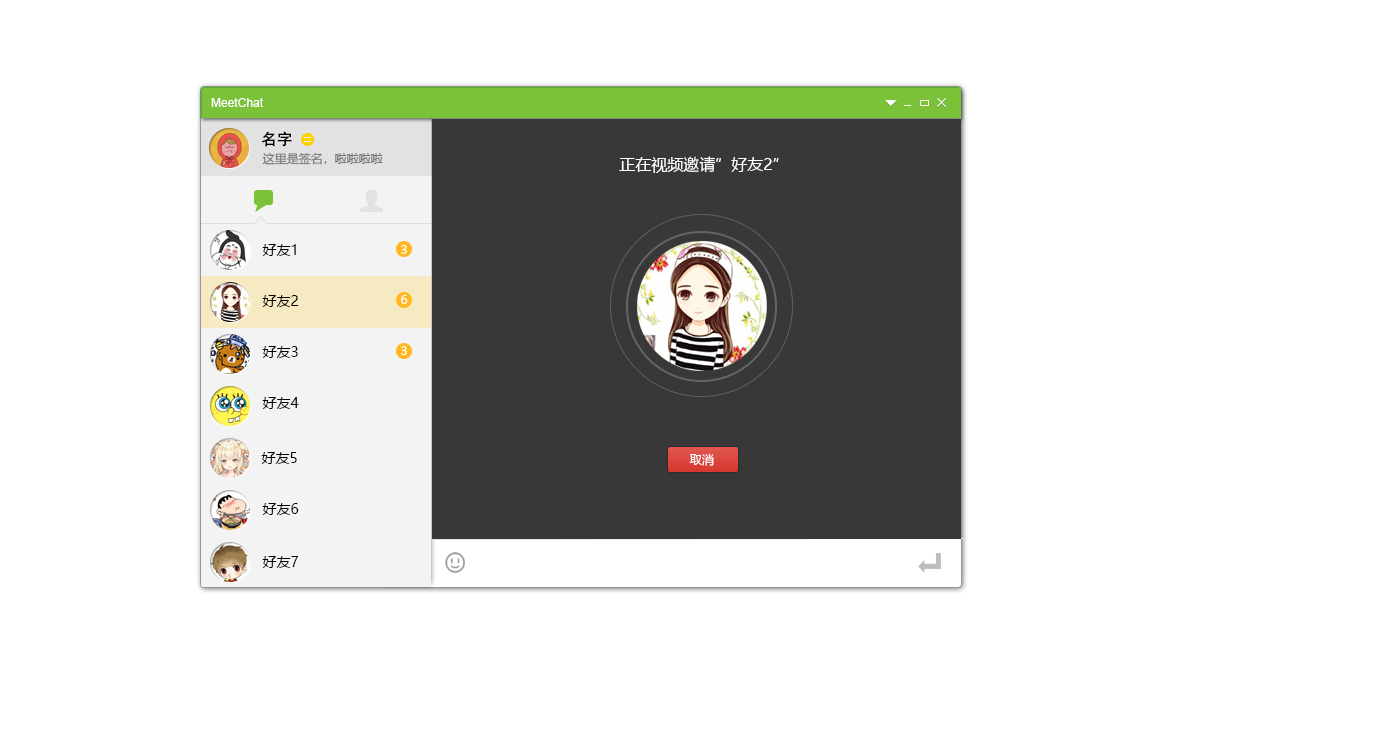
<style>
.page{position:relative;width:1400px;height:752px;background:#ffffff}
.page>*{position:absolute;margin:0}
.t1{font:12px "ArialMT";color:#ffffff}
.t2{font:16px "AdobeHeitiStd-Regular";color:#000000}
.t3{font:12px "MicrosoftYaHei";color:#767676}
.t4{font:16px "MicrosoftYaHei";color:#ffffff}
.t5{font:14px "MicrosoftYaHei";color:#000000}
.t6{font:12px "MicrosoftYaHei";color:#ffffff}
</style>
<div class="page">
<p class="t1" style="left:211px;top:98px;width:52px;height:9px">MeetChat</p>
<p class="t2" style="left:261px;top:131px;width:31px;height:16px">名字</p>
<p class="t3" style="left:262px;top:152px;width:121px;height:13px">这里是签名，啦啦啦啦</p>
<p class="t4" style="left:619px;top:156px;width:160px;height:17px">正在视频邀请”好友2”</p>
<p class="t5" style="left:262px;top:244px;width:34px;height:12px">好友1</p>
<p class="t6" style="left:401px;top:245px;width:6px;height:9px">3</p>
<p class="t5" style="left:262px;top:295px;width:37px;height:12px">好友2</p>
<p class="t6" style="left:401px;top:295px;width:7px;height:9px">6</p>
<p class="t5" style="left:262px;top:346px;width:36px;height:12px">好友3</p>
<p class="t6" style="left:401px;top:346px;width:6px;height:9px">3</p>
<p class="t5" style="left:262px;top:397px;width:37px;height:12px">好友4</p>
<p class="t5" style="left:261px;top:452px;width:36px;height:12px">好友5</p>
<p class="t6" style="left:689px;top:453px;width:25px;height:13px">取消</p>
<p class="t5" style="left:262px;top:503px;width:37px;height:12px">好友6</p>
<p class="t5" style="left:262px;top:556px;width:37px;height:12px">好友7</p>
</div>
